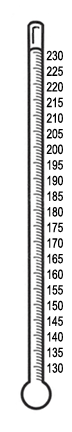
<style>
.page{position:relative;width:72px;height:432px;background:#ffffff}
.page>*{position:absolute;margin:0}
.t1{font:13px "ArialMT";color:#000000;scale:0.77 1}
</style>
<div class="page">
<p class="t1" style="left:46px;top:50px;width:17px;height:323px;text-align:center">230<br>225<br>220<br>215<br>210<br>205<br>200<br>195<br>190<br>185<br>180<br>175<br>170<br>165<br>160<br>155<br>150<br>145<br>140<br>135<br>130</p>
</div>
